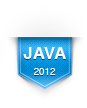
<style>
.page{position:relative;width:87px;height:108px;background:#ffffff}
.page>*{position:absolute;margin:0}
.t1{font:17px "Helvetica-Bold";color:#fefefe}
.t2{font:9.7px "Helvetica";color:#fefefe}
</style>
<div class="page">
<p class="t1" style="left:23px;top:47px;width:43px;height:28px;text-align:center">JAVA<br><br><span class="t2">2012</span></p>
</div>
